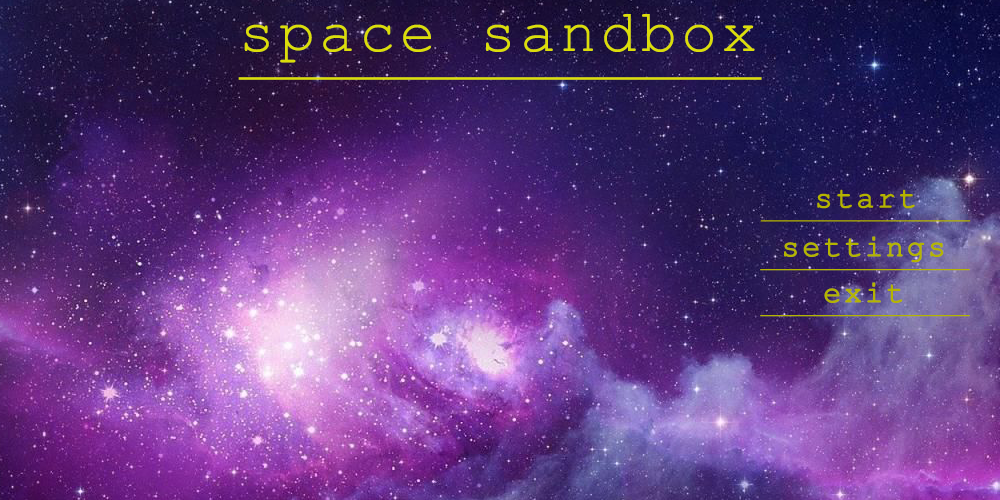
<style>
.page{position:relative;width:1000px;height:500px}
.page>*{position:absolute;margin:0}
.t1{font:60px "CourierNewPSMT";letter-spacing:0.07em;color:#dbdd0a;text-decoration:underline}
.t2{font:30px "CourierNewPSMT";letter-spacing:0.07em;color:#b4b400;font-weight:bold;text-decoration:underline}
</style>
<div class="page">
<p class="t1" style="left:238px;top:14px;width:524px;height:66px">space sandbox</p>
<p class="t2" style="left:760px;top:236px;width:210px;height:35px">settings</p>
<p class="t2" style="left:760px;top:282px;width:210px;height:35px">exit</p>
</div>
